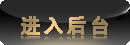
<style>
.page{position:relative;width:130px;height:45px;background:#282828}
.page>*{position:absolute;margin:0}
.t1{font:20px "SimHei";letter-spacing:0.1em;font-weight:bold}
</style>
<div class="page">
<p class="t1" style="left:21px;top:16px;width:87px;height:19px">进入后台</p>
</div>
